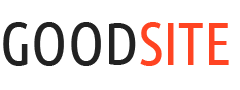
<style>
.page{position:relative;width:240px;height:90px;background:#ffffff}
.page>*{position:absolute;margin:0}
.t1{font:60px "UbuntuCondensed-Regular";color:#222222}
.t2{font:60px "UbuntuCondensed-Regular";color:#ff4422}
</style>
<div class="page">
<p class="t1" style="left:3px;top:22px;width:226px;height:44px">GOOD<span class="t2">SITE</span></p>
</div>
